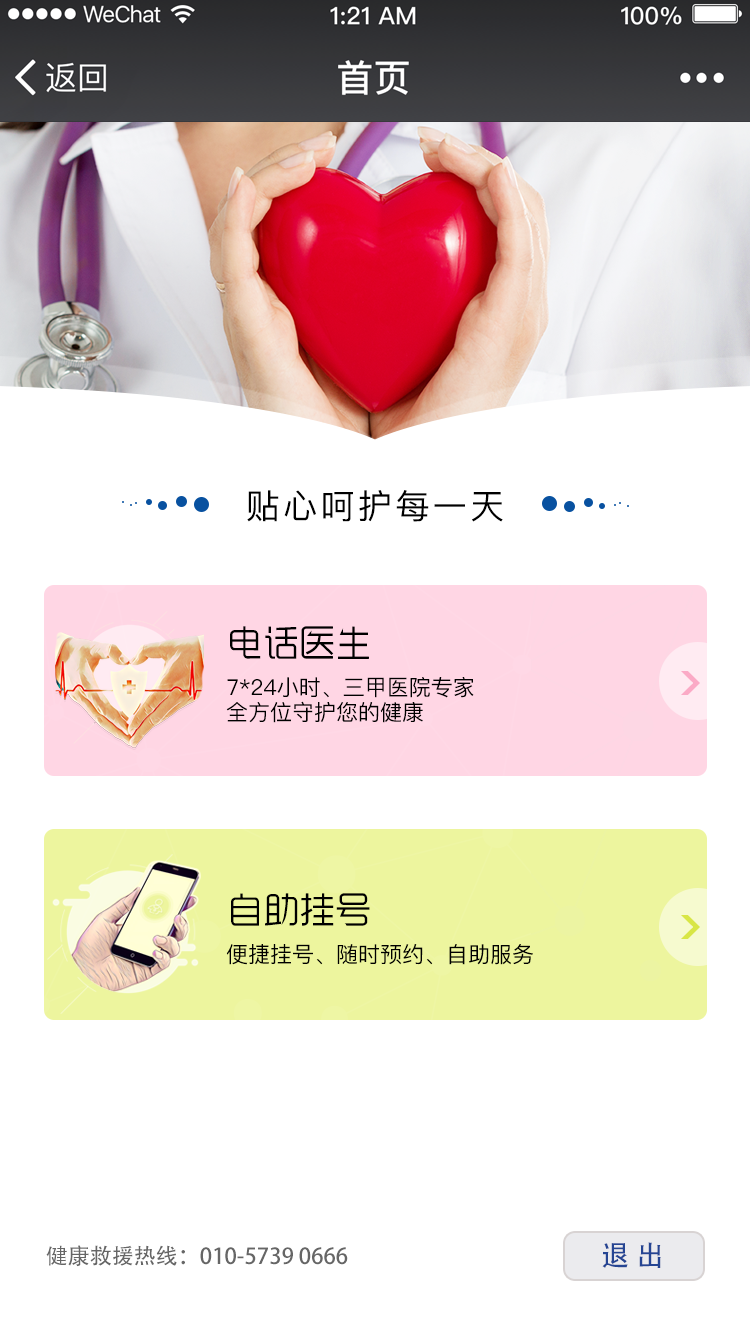
<style>
.page{position:relative;width:750px;height:1334px;background:#ffffff}
.page>*{position:absolute;margin:0}
.t1{font:34px "PingFang-SC-Medium";letter-spacing:0.1em;color:#000000}
.t2{font:22px/40px "PingFang-SC-Medium";color:#000000}
.t3{font:36px/40px "ZoomlaYasong-A001";color:#000000}
.t4{font:22px/25px "PingFang-SC-Medium";color:#000000}
.t5{font:22px "AdobeHeitiStd-Regular";color:#666666}
.t6{font:28.4px "AdobeHeitiStd-Regular";color:#254593}
</style>
<div class="page">
<p class="t1" style="left:247px;top:490px;width:256px;height:32px">贴心呵护每一天</p>
<p class="t2" style="left:226px;top:626px;width:248px;height:97px"><span class="t3">电话医生<br></span>7*24小时、三甲医院专家<br><span class="t4">全方位守护您的健康</span></p>
<p class="t2" style="left:226px;top:893px;width:307px;height:72px"><span class="t3">自助挂号<br></span>便捷挂号、随时预约、自助服务</p>
<p class="t5" style="left:46px;top:1245px;width:302px;height:22px">健康救援热线：010-5739 0666</p>
<p class="t6" style="left:602px;top:1242px;width:59px;height:26px">退 出</p>
</div>
